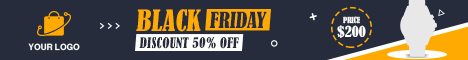
<style>
.page{position:relative;width:468px;height:60px;background:#262c3c}
.page>*{position:absolute;margin:0}
.t1{font:27.2px "BernardMT-Condensed";color:#ffa903}
.t2{font:20.7px "BernardMT-Condensed";color:#262c3c}
.t3{font:7.7px "BernardMT-Condensed";color:#ffffff}
.t4{font:14.3px "BernardMT-Condensed";color:#ffffff}
.t5{font:13.7px "BernardMT-Condensed";color:#262c3c}
.t6{font:8.5px "Helvetica-Bold";color:#ffffff}
</style>
<div class="page">
<p class="t1" style="left:136px;top:9px;width:65px;height:23px">BLACK</p>
<p class="t2" style="left:209px;top:11px;width:58px;height:17px">FRIDAY</p>
<p class="t3" style="left:343px;top:16px;width:17px;height:8px">PRICE</p>
<p class="t4" style="left:337px;top:25px;width:29px;height:13px">$200</p>
<p class="t5" style="left:139px;top:37px;width:100px;height:12px">DISCOUNT 50% OFF</p>
<p class="t6" style="left:28px;top:43px;width:52px;height:8px">YOUR LOGO</p>
</div>
